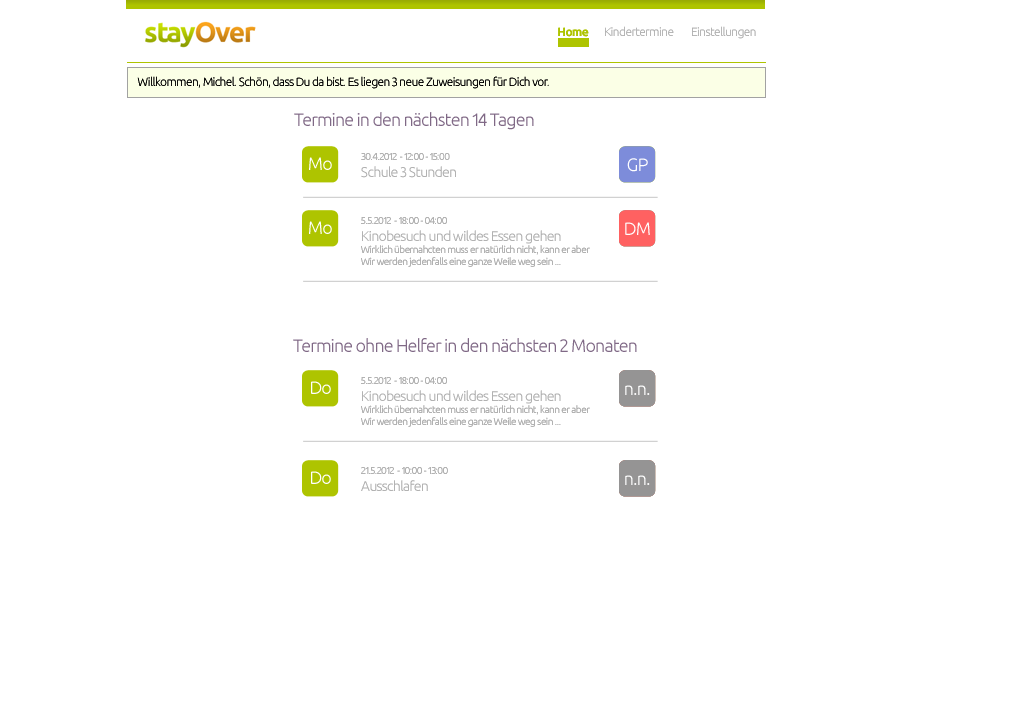
<style>
.page{position:relative;width:1024px;height:728px;background:#ffffff}
.page>*{position:absolute;margin:0}
.t1{font:12px "Ubuntu-Bold";letter-spacing:-0.05em;color:#aec400}
.t2{font:12px "Ubuntu-Light";letter-spacing:-0.05em;color:#b2b2b2}
.t3{font:12px "Ubuntu-Light";letter-spacing:-0.05em;color:#000000}
.t4{font:18px "Ubuntu-Light";letter-spacing:-0.05em;color:#806986}
.t5{font:18px "Ubuntu-Light";letter-spacing:-0.05em;color:#ffffff}
.t6{font:10px "Ubuntu-Light";letter-spacing:-0.05em;color:#b2b2b2}
.t7{font:14px "Ubuntu-Light";letter-spacing:-0.05em;color:#b2b2b2}
</style>
<div class="page">
<p class="t1" style="left:558px;top:27px;width:31px;height:10px">Home</p>
<p class="t2" style="left:605px;top:26px;width:69px;height:10px">Kindertermine</p>
<p class="t2" style="left:692px;top:26px;width:64px;height:13px">Einstellungen</p>
<p class="t3" style="left:137px;top:76px;width:412px;height:13px">Willkommen, Michel. Schön, dass Du da bist. Es liegen 3 neue Zuweisungen für Dich vor.</p>
<p class="t4" style="left:294px;top:112px;width:240px;height:18px">Termine in den nächsten 14 Tagen</p>
<p class="t5" style="left:309px;top:157px;width:23px;height:13px">Mo</p>
<p class="t6" style="left:361px;top:153px;width:95px;height:25px">30.4.2012  - 12:00 - 15:00<br><span class="t7">Schule 3 Stunden</span></p>
<p class="t5" style="left:627px;top:158px;width:21px;height:14px">GP</p>
<p class="t5" style="left:309px;top:221px;width:23px;height:13px">Mo</p>
<p class="t6" style="left:361px;top:217px;width:229px;height:50px">5.5.2012  - 18:00 - 04:00<br><span class="t7">Kinobesuch und wildes Essen gehen<br></span>Wirklich übernahcten muss er natürlich nicht, kann er aber<br>Wir werden jedenfalls eine ganze Weile weg sein ...</p>
<p class="t5" style="left:625px;top:222px;width:25px;height:13px">DM</p>
<p class="t4" style="left:293px;top:338px;width:344px;height:14px">Termine ohne Helfer in den nächsten 2 Monaten</p>
<p class="t6" style="left:361px;top:377px;width:229px;height:50px">5.5.2012  - 18:00 - 04:00<br><span class="t7">Kinobesuch und wildes Essen gehen<br></span>Wirklich übernahcten muss er natürlich nicht, kann er aber<br>Wir werden jedenfalls eine ganze Weile weg sein ...</p>
<p class="t5" style="left:311px;top:381px;width:20px;height:13px">Do</p>
<p class="t5" style="left:625px;top:385px;width:25px;height:10px">n.n.</p>
<p class="t5" style="left:311px;top:471px;width:20px;height:13px">Do</p>
<p class="t6" style="left:361px;top:467px;width:87px;height:24px">21.5.2012  - 10:00 - 13:00<br><span class="t7">Ausschlafen</span></p>
<p class="t5" style="left:625px;top:475px;width:25px;height:10px">n.n.</p>
</div>
